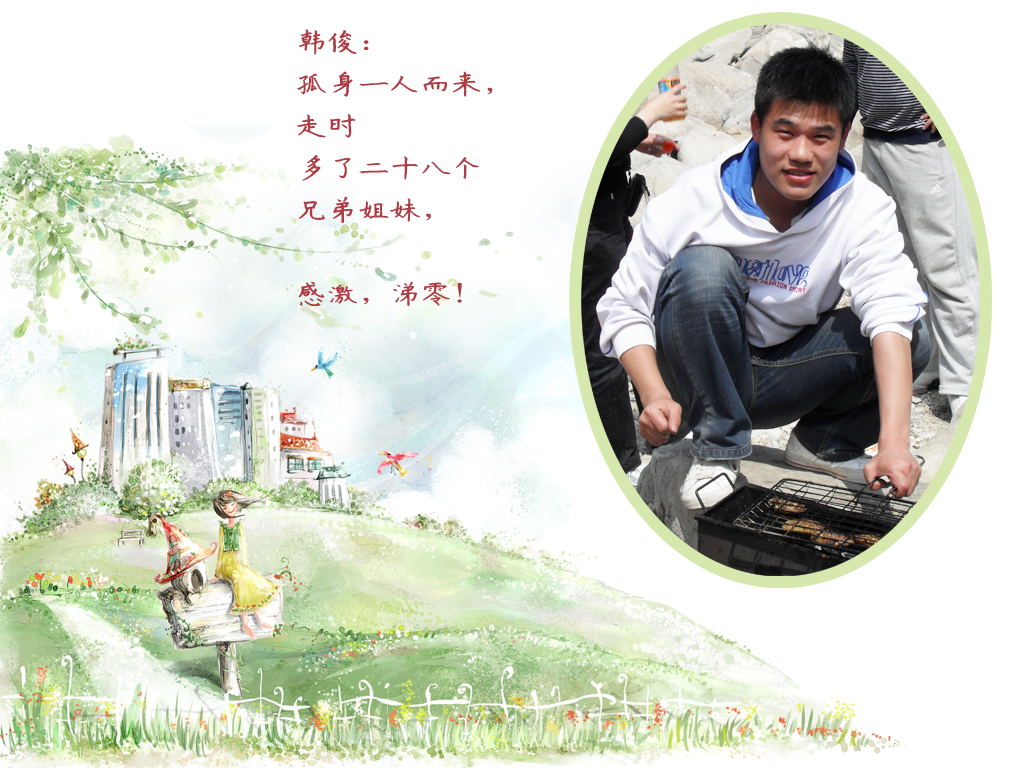
<style>
.page{position:relative;width:1024px;height:768px;background:#ffffff}
.page>*{position:absolute;margin:0}
.t1{font:24px/42px "ÊéÌå·»ÕÔ¾Å½­¸Ö±Ê¿¬Êé";color:#ad3c44;scale:1.3 1}
</style>
<div class="page">
<p class="t1" style="left:297px;top:29px;width:196px;height:277px">韩俊：<br>孤身一人而来，<br>走时<br>多了二十八个<br>兄弟姐妹，<br><br>感激，涕零！</p>
</div>
